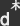
<style>
.page{position:relative;width:20px;height:26px;background:#333333}
.page>*{position:absolute;margin:0}
.t1{font:12px "DFKaiShu-SB-Estd-BF";color:#ececec;font-weight:bold}
.t2{font:18px "ArialMT";color:#ececec;font-weight:bold}
</style>
<div class="page">
<p class="t1" style="left:10px;top:0px;width:12px;height:11px">木</p>
<p class="t2" style="left:0px;top:12px;width:9px;height:14px">d</p>
</div>
